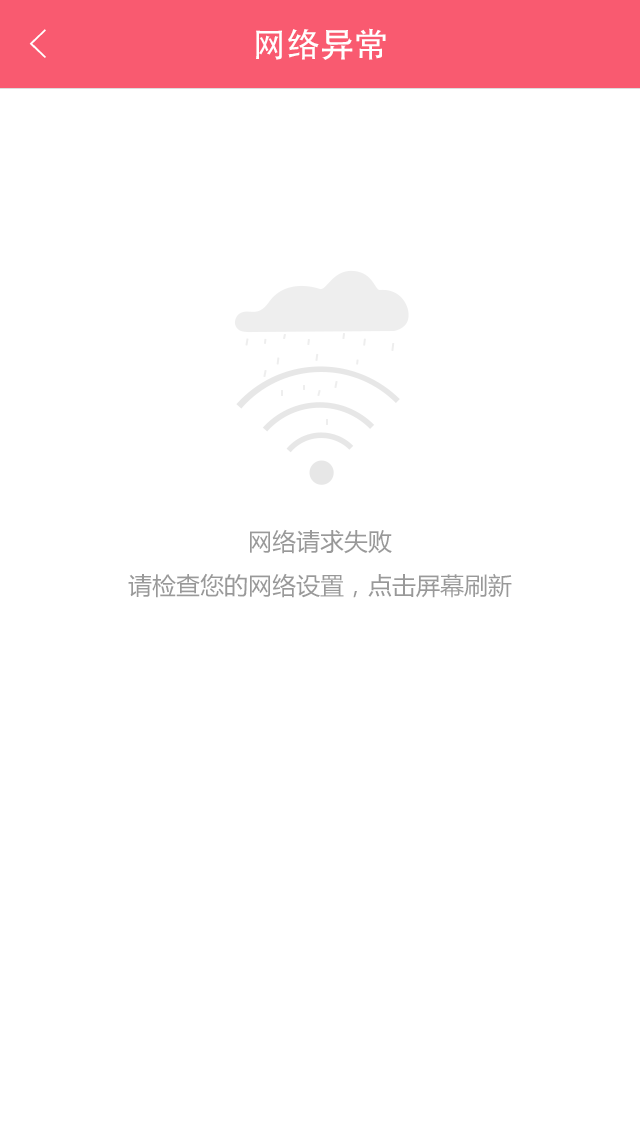
<style>
.page{position:relative;width:640px;height:1136px;background:#ffffff}
.page>*{position:absolute;margin:0}
.t1{font:40px "FZYXJW--GB1-0";color:#ffffff}
.t2{font:34px "AdobeHeitiStd-Regular";color:#ffffff}
.t3{font:24px/44px "MicrosoftYaHei";color:#999999}
</style>
<div class="page">
<p class="t1" style="left:29px;top:29px;width:17px;height:29px">&lt;</p>
<p class="t2" style="left:256px;top:28px;width:130px;height:32px">网络异常</p>
<p class="t3" style="left:128px;top:529px;width:384px;height:69px;text-align:center">网络请求失败<br>请检查您的网络设置，点击屏幕刷新</p>
</div>
